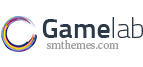
<style>
.page{position:relative;width:143px;height:67px;background:#ffffff}
.page>*{position:absolute;margin:0}
.t1{font:12px/12px "MinionPro-Regular";color:#9d9d9d}
.t2{font:28px/24px "Titillium-Semibold";color:#2a3847}
.t3{font:28px/24px "Titillium-Thin";color:#2a3847}
</style>
<div class="page">
<p class="t1" style="left:42px;top:17px;width:101px;height:32px"><span class="t2">Game</span><span class="t3">lab<br>  </span>smthemes.com</p>
</div>
